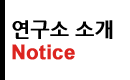
<style>
.page{position:relative;width:130px;height:80px;background:#ffffff}
.page>*{position:absolute;margin:0}
.t1{font:20px/24px "NanumGothicBold";color:#000000;font-weight:bold}
.t2{font:20px/24px "Arial-BoldMT";color:#dc241f;font-weight:bold}
</style>
<div class="page">
<p class="t1" style="left:12px;top:20px;width:101px;height:40px">연구소 소개<br><span class="t2">Notice</span></p>
</div>
